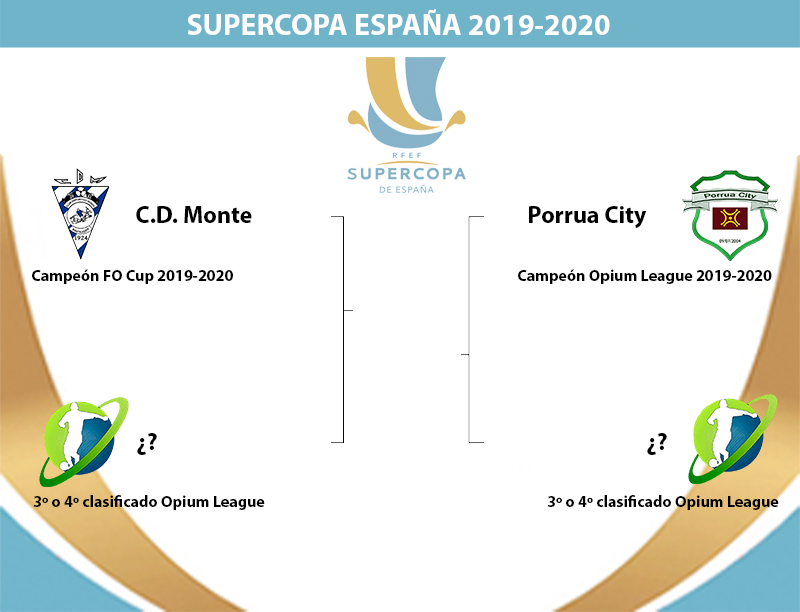
<style>
.page{position:relative;width:800px;height:612px;background:#ffffff}
.page>*{position:absolute;margin:0}
.t1{font:30px "MyriadPro-Bold";color:#fefefe}
.t2{font:24px "MyriadPro-Bold";color:#000000}
.t3{font:16px "MyriadPro-Bold";color:#000000}
</style>
<div class="page">
<p class="t1" style="left:187px;top:9px;width:423px;height:26px">SUPERCOPA ESPAÑA 2019-2020</p>
<p class="t2" style="left:136px;top:206px;width:116px;height:17px">C.D. Monte</p>
<p class="t2" style="left:529px;top:206px;width:118px;height:22px">Porrua City</p>
<p class="t3" style="left:32px;top:269px;width:201px;height:15px">Campeón FO Cup 2019-2020</p>
<p class="t3" style="left:518px;top:269px;width:254px;height:15px">Campeón Opium League 2019-2020</p>
<p class="t2" style="left:137px;top:433px;width:20px;height:22px">¿?</p>
<p class="t2" style="left:647px;top:433px;width:20px;height:22px">¿?</p>
<p class="t3" style="left:33px;top:495px;width:232px;height:15px">3º o 4º clasificado Opium League</p>
<p class="t3" style="left:547px;top:495px;width:232px;height:15px">3º o 4º clasificado Opium League</p>
</div>
